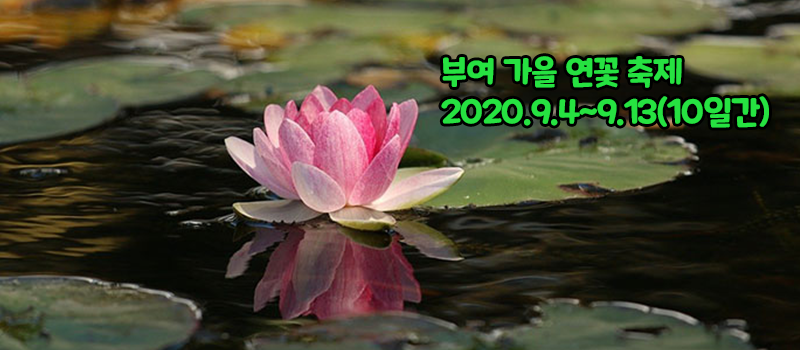
<style>
.page{position:relative;width:800px;height:350px}
.page>*{position:absolute;margin:0}
.t1{font:33.3px "MaplestoryBold";letter-spacing:-0.025em;color:#26e241}
</style>
<div class="page">
<p class="t1" style="left:441px;top:56px;width:328px;height:72px">부여 가을 연꽃 축제<br>2020.9.4~9.13(10일간)</p>
</div>
